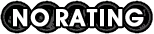
<style>
.page{position:relative;width:154px;height:34px;background:#ffffff}
.page>*{position:absolute;margin:0}
.t1{font:24px "AvantGardeITCbyBT-Demi";letter-spacing:0.05em;color:#ffffff;font-weight:bold}
</style>
<div class="page">
<p class="t1" style="left:13px;top:8px;width:131px;height:19px">NO RATING</p>
</div>
